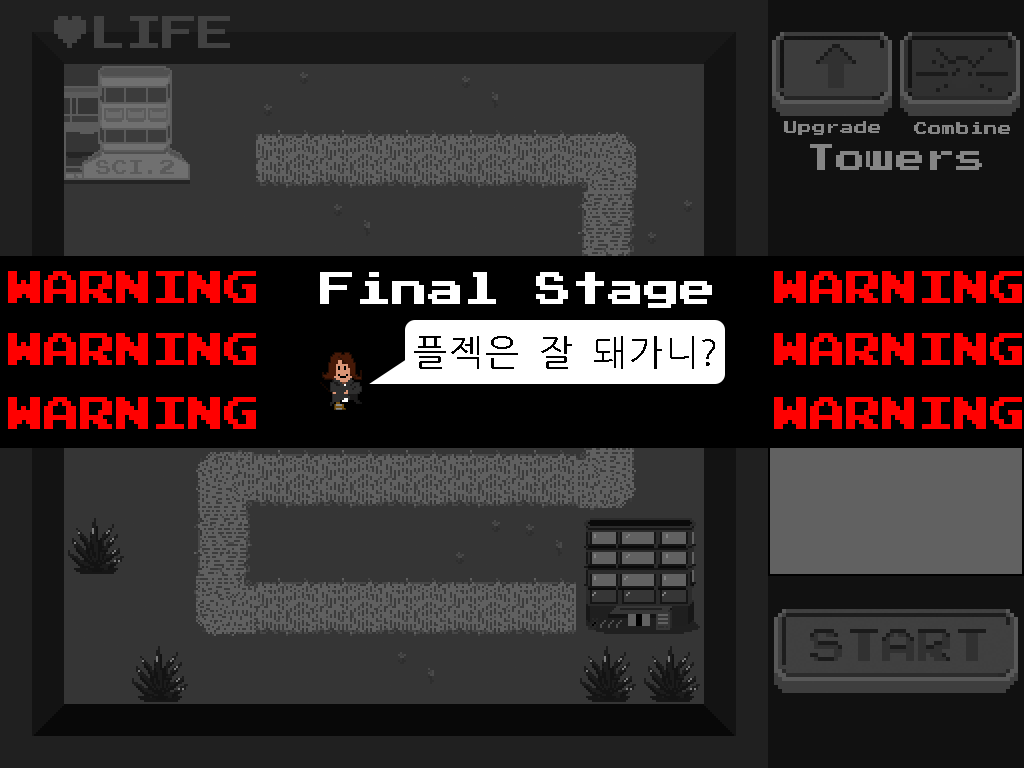
<style>
.page{position:relative;width:1024px;height:768px;background:#353535}
.page>*{position:absolute;margin:0}
.t1{font:36px "PressStart2P";color:#ff0000}
.t2{font:36px "PressStart2P";color:#ffffff}
.t3{font:36px "NanumGothicCoding";color:#000000}
</style>
<div class="page">
<p class="t1" style="left:8px;top:271px;width:248px;height:32px">WARNING</p>
<p class="t2" style="left:320px;top:272px;width:392px;height:36px">Final Stage</p>
<p class="t1" style="left:774px;top:271px;width:248px;height:32px">WARNING</p>
<p class="t1" style="left:8px;top:333px;width:248px;height:32px">WARNING</p>
<p class="t3" style="left:414px;top:336px;width:301px;height:33px">플젝은 잘 돼가니?</p>
<p class="t1" style="left:774px;top:333px;width:248px;height:32px">WARNING</p>
<p class="t1" style="left:8px;top:397px;width:248px;height:32px">WARNING</p>
<p class="t1" style="left:774px;top:397px;width:248px;height:32px">WARNING</p>
</div>
